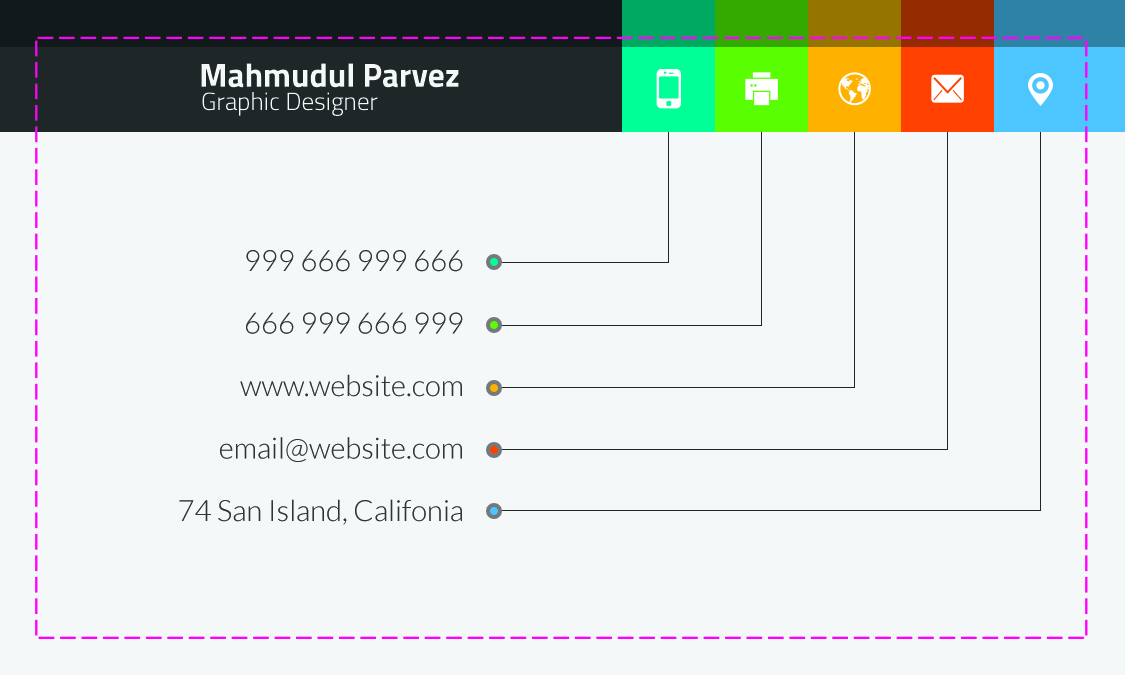
<style>
.page{position:relative;width:1125px;height:675px;background:#f5f8f8}
.page>*{position:absolute;margin:0}
.t1{font:33.3px "Titillium-Bold";color:#f5f8f8}
.t2{font:25px "Titillium-Light";color:#f5f8f8}
.t3{font:29.2px/62.5px "Lato-Light";color:#2b3638}
</style>
<div class="page">
<p class="t1" style="left:201px;top:63px;width:258px;height:25px">Mahmudul Parvez</p>
<p class="t2" style="left:202px;top:92px;width:176px;height:24px">Graphic Designer</p>
<p class="t3" style="left:179px;top:250px;width:284px;height:275px;text-align:right">999 666 999 666<br>666 999 666 999<br>www.website.com<br>email@website.com<br>74 San Island, Califonia</p>
</div>
